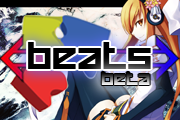
<style>
.page{position:relative;width:180px;height:120px}
.page>*{position:absolute;margin:0}
.t1{font:26.8px "HappyKiller";color:#000000;scale:1.05 1}
</style>
<div class="page">
<p class="t1" style="left:28px;top:42px;width:123px;height:27px">beats</p>
</div>
